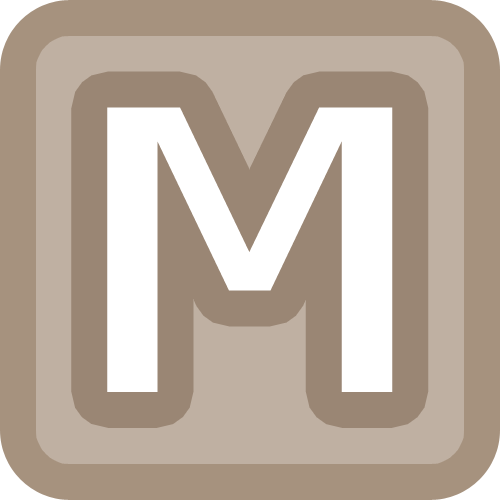
<style>
.page{position:relative;width:500px;height:500px;background:#9a8674}
.page>*{position:absolute;margin:0}
.t1{font:391.4px "Menlo-Regular";color:#ffffff;scale:1.41 1}
</style>
<div class="page">
<p class="t1" style="left:107px;top:107px;width:286px;height:285px">M</p>
</div>
